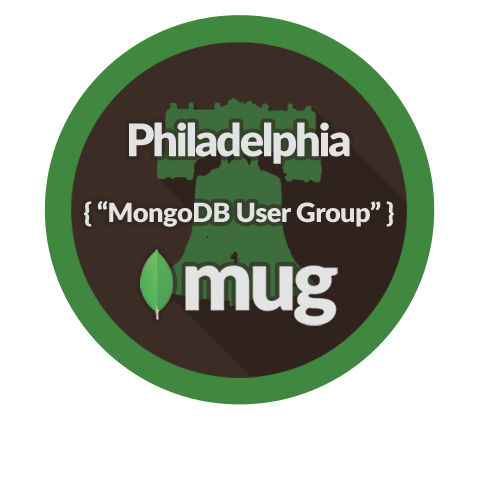
<style>
.page{position:relative;width:482px;height:482px;background:#ffffff}
.page>*{position:absolute;margin:0}
.t1{font:45.1px "Lato-Black";letter-spacing:-0.05em;color:#e3e3e3}
.t2{font:26.8px "Lato-Black";letter-spacing:-0.025em;color:#e3e3e3}
</style>
<div class="page">
<p class="t1" style="left:129px;top:122px;width:221px;height:42px">Philadelphia</p>
<p class="t2" style="left:84px;top:201px;width:310px;height:26px">{ “MongoDB User Group” }</p>
</div>
